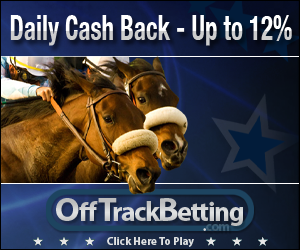
<style>
.page{position:relative;width:300px;height:250px}
.page>*{position:absolute;margin:0}
.t1{font:34.5px "HelveticaNeue-CondensedBold";scale:0.72 1}
.t2{font:27.4px "MyriadPro-Bold";letter-spacing:-0.05em;color:#e0e2e2}
.t3{font:34.2px "MyriadPro-Bold";color:#e0e2e2}
.t4{font:27.4px "MyriadPro-Bold";letter-spacing:0.05em;color:#e0e2e2}
.t5{font:34.2px "MyriadPro-Bold";letter-spacing:-0.15em;color:#e0e2e2}
.t6{font:34.2px "MyriadPro-Bold";letter-spacing:-0.05em;color:#e0e2e2}
.t7{font:13.5px "MyriadPro-Bold";letter-spacing:-0.05em;color:#3e647e}
.t8{font:13.5px "MyriadPro-Bold";letter-spacing:-0.05em;color:#ffffff}
.t9{font:11.2px "MyriadPro-Bold";color:#e0e2e2}
</style>
<div class="page">
<p class="t1" style="left:10px;top:10px;width:282px;height:38px">Daily Cash Back - Up to 12%</p>
<p class="t2" style="left:55px;top:193px;width:188px;height:37px"><span class="t3">O</span><span class="t4">ff</span><span class="t5">T</span>rack<span class="t6">B</span>etting</p>
<p class="t7" style="left:203px;top:220px;width:26px;height:15px"><span class="t8">.</span>com</p>
<p class="t9" style="left:107px;top:236px;width:87px;height:12px">Click Here To Play</p>
</div>
